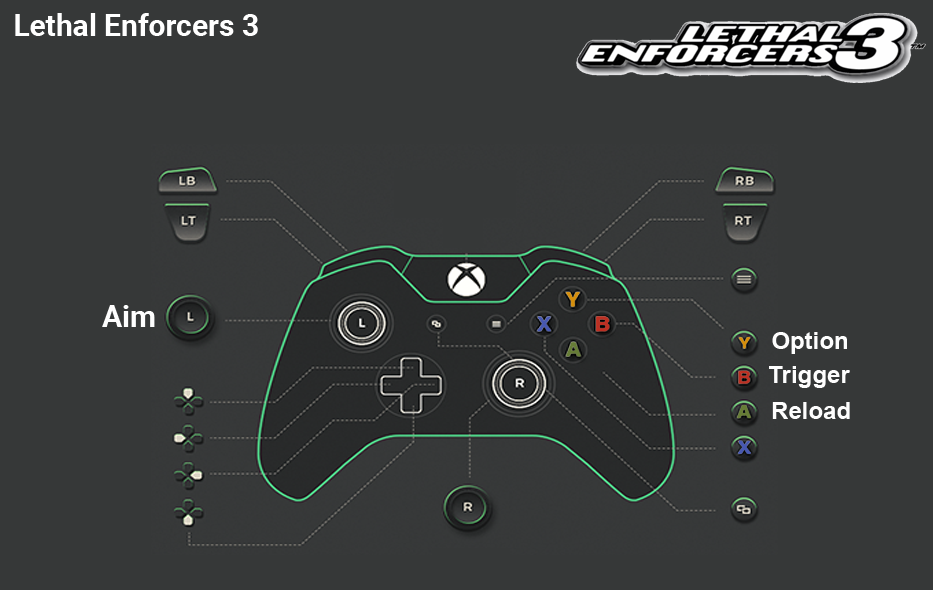
<style>
.page{position:relative;width:933px;height:590px;background:#363838}
.page>*{position:absolute;margin:0}
.t1{font:30px "Roboto-Bold";color:#ffffff}
.t2{font:30px "Roboto-Bold";color:#fefefe}
.t3{font:24px "Arial-BoldMT";color:#fefefe}
</style>
<div class="page">
<p class="t1" style="left:15px;top:13px;width:243px;height:23px">Lethal Enforcers 3</p>
<p class="t2" style="left:102px;top:305px;width:53px;height:22px">Aim</p>
<p class="t3" style="left:772px;top:332px;width:75px;height:22px">Option</p>
<p class="t3" style="left:769px;top:366px;width:81px;height:22px">Trigger</p>
<p class="t3" style="left:772px;top:402px;width:78px;height:17px">Reload</p>
</div>
